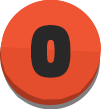
<style>
.page{position:relative;width:101px;height:109px;background:#f05533}
.page>*{position:absolute;margin:0}
.t1{font:72px "MovaviGrotesqueBlack";color:#282828}
</style>
<div class="page">
<p class="t1" style="left:31px;top:25px;width:40px;height:53px">0</p>
</div>
